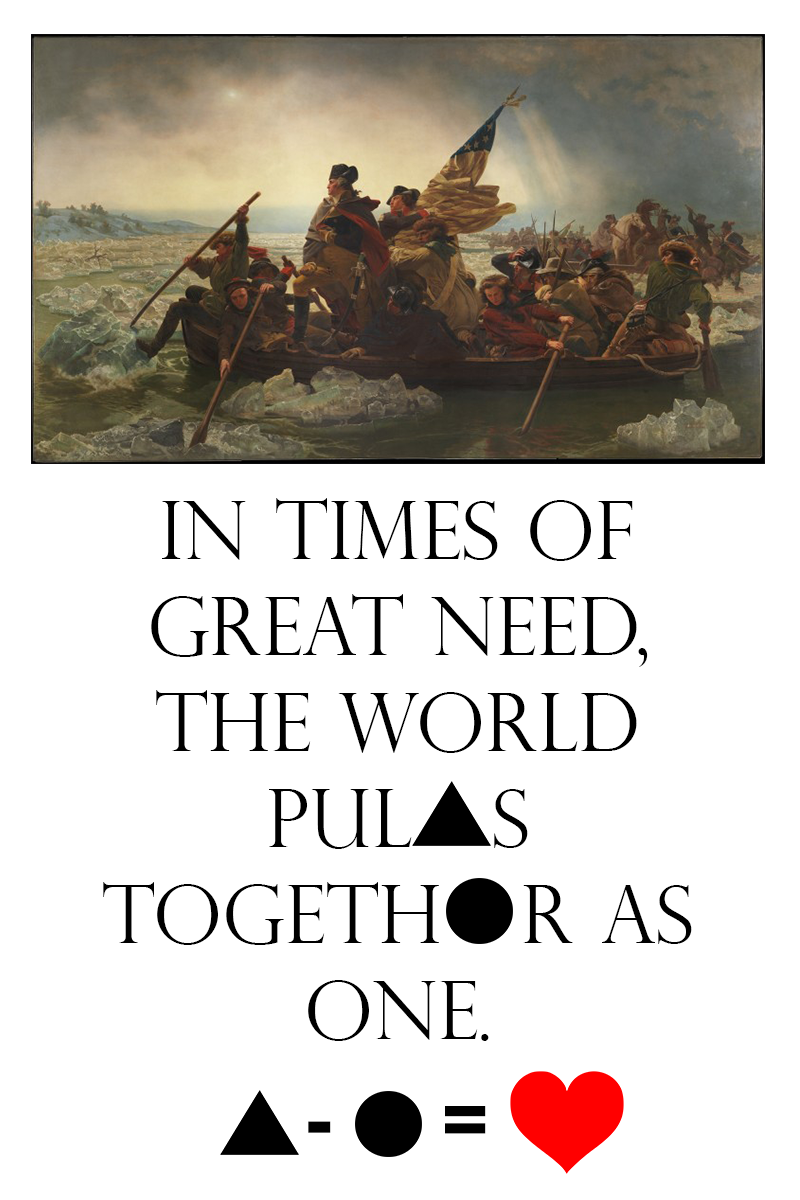
<style>
.page{position:relative;width:800px;height:1200px;background:#ffffff}
.page>*{position:absolute;margin:0}
.t1{font:80px "PerpetuaTitlingMT-Light";color:#000000}
.t2{font:80px "Arial-BoldMT";color:#000000}
</style>
<div class="page">
<p class="t1" style="left:103px;top:498px;width:589px;height:543px;text-align:center">In times of great need, the world <br>pul   s <br>togeth   r as one.</p>
<p class="t2" style="left:308px;top:1106px;width:178px;height:28px">-     =</p>
</div>
